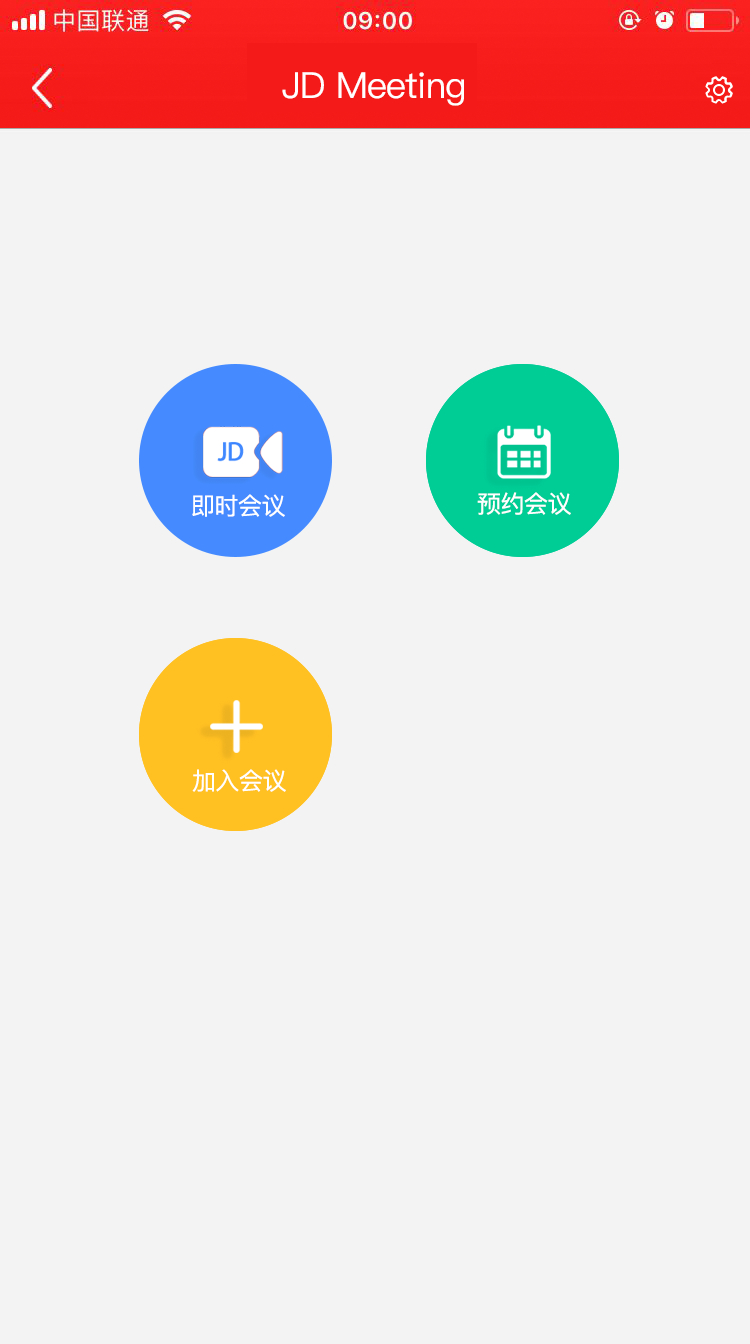
<style>
.page{position:relative;width:750px;height:1344px;background:#f3f3f3}
.page>*{position:absolute;margin:0}
.t1{font:36px "PingFangSC-Regular";letter-spacing:-0.02em;color:#ffffff}
.t2{font:24px "PingFangSC-Regular";letter-spacing:-0.02em;color:#ffffff}
</style>
<div class="page">
<p class="t1" style="left:282px;top:72px;width:182px;height:34px">JD Meeting</p>
<p class="t2" style="left:477px;top:492px;width:94px;height:23px">预约会议</p>
<p class="t2" style="left:192px;top:769px;width:94px;height:23px">加入会议</p>
</div>
